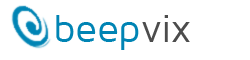
<style>
.page{position:relative;width:250px;height:60px;background:#ffffff}
.page>*{position:absolute;margin:0}
.t1{font:40px "MavenProRegular";color:#0084b4}
.t2{font:40px "MavenProRegular";color:#4c4c4c}
</style>
<div class="page">
<p class="t1" style="left:56px;top:15px;width:134px;height:35px">beep<span class="t2">vix</span></p>
</div>
